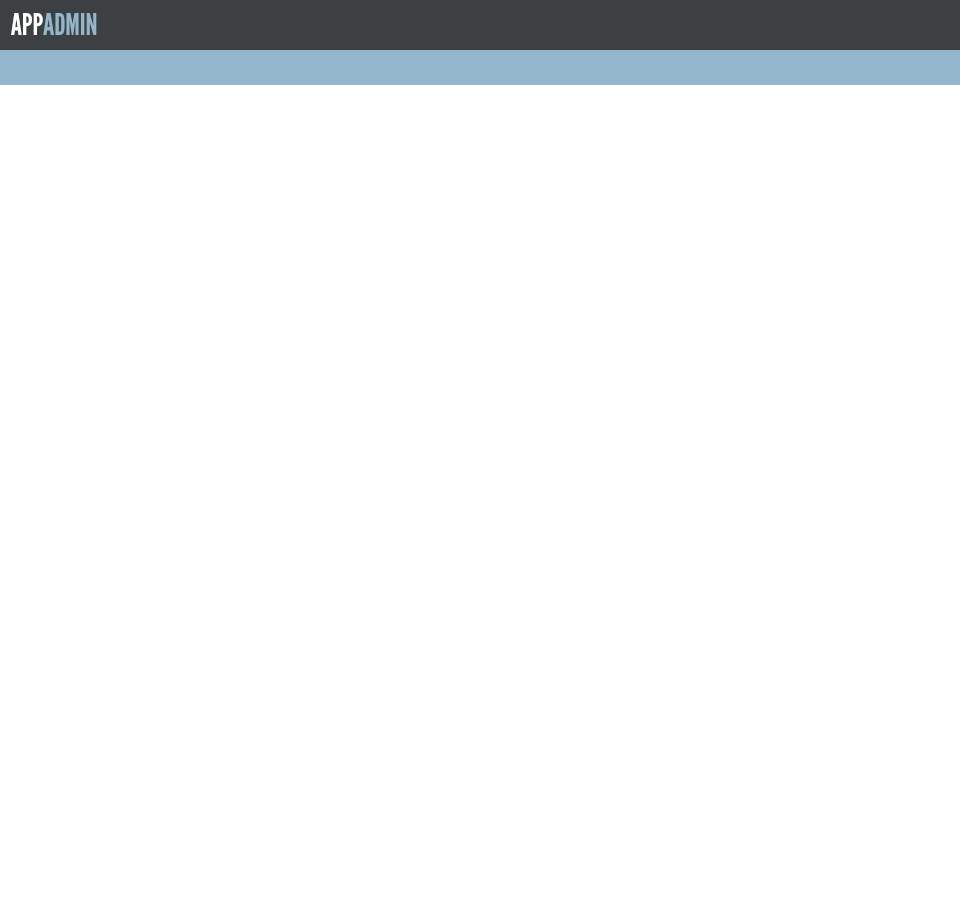
<style>
.page{position:relative;width:960px;height:900px;background:#ffffff}
.page>*{position:absolute;margin:0}
.t1{font:30px "LeagueGothic";color:#93b6cd}
.t2{font:30px "LeagueGothic";color:#ffffff}
</style>
<div class="page">
<p class="t1" style="left:11px;top:13px;width:86px;height:22px"><span class="t2">APP</span>ADMIN</p>
</div>
